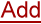
<style>
.page{position:relative;width:41px;height:24px;background:#ffffff}
.page>*{position:absolute;margin:0}
.t1{font:22.7px "ArialMT";color:#a10000}
</style>
<div class="page">
<p class="t1" style="left:0px;top:1px;width:40px;height:17px">Add</p>
</div>
